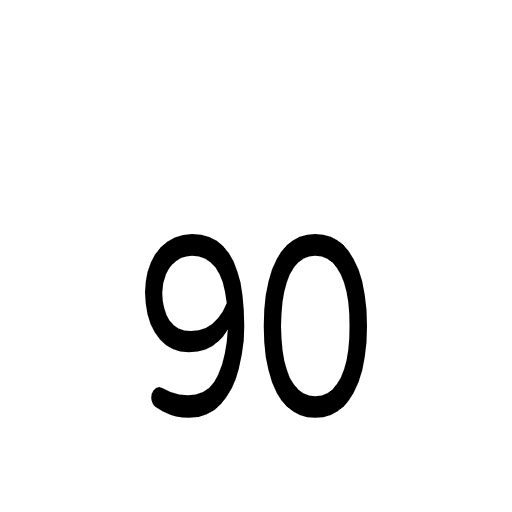
<style>
.page{position:relative;width:512px;height:512px;background:#ffffff}
.page>*{position:absolute;margin:0}
.t1{font:256px "VarelaRound-Regular";color:#000000;scale:0.74 1}
</style>
<div class="page">
<p class="t1" style="left:145px;top:234px;width:222px;height:184px">90</p>
</div>
